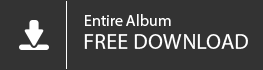
<style>
.page{position:relative;width:263px;height:70px;background:#333333}
.page>*{position:absolute;margin:0}
.t1{font:16px "MyriadPro-Regular";color:#ffffff}
.t2{font:22px "MyriadPro-Regular";color:#ffffff;text-transform:uppercase}
</style>
<div class="page">
<p class="t1" style="left:85px;top:14px;width:86px;height:12px">Entire Album</p>
<p class="t2" style="left:84px;top:34px;width:164px;height:15px">Free Download</p>
</div>
